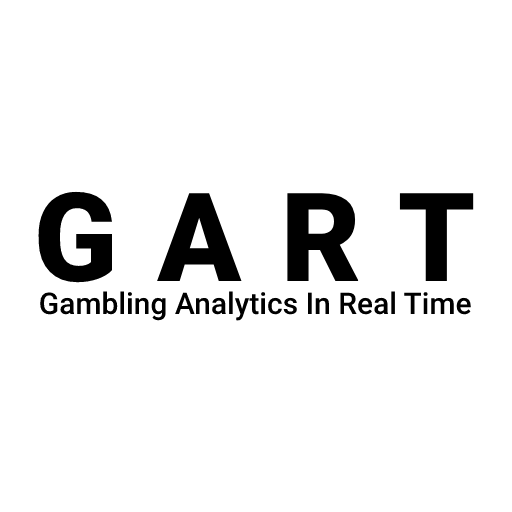
<style>
.page{position:relative;width:512px;height:512px;background:#ffffff}
.page>*{position:absolute;margin:0}
.t1{font:123.6px "Roboto-Black";letter-spacing:0.321em;color:#000000}
.t2{font:30px "Roboto-Medium";color:#000000}
</style>
<div class="page">
<p class="t1" style="left:38px;top:191px;width:436px;height:92px">GART</p>
<p class="t2" style="left:40px;top:291px;width:431px;height:30px">Gambling Analytics In Real Time</p>
</div>
